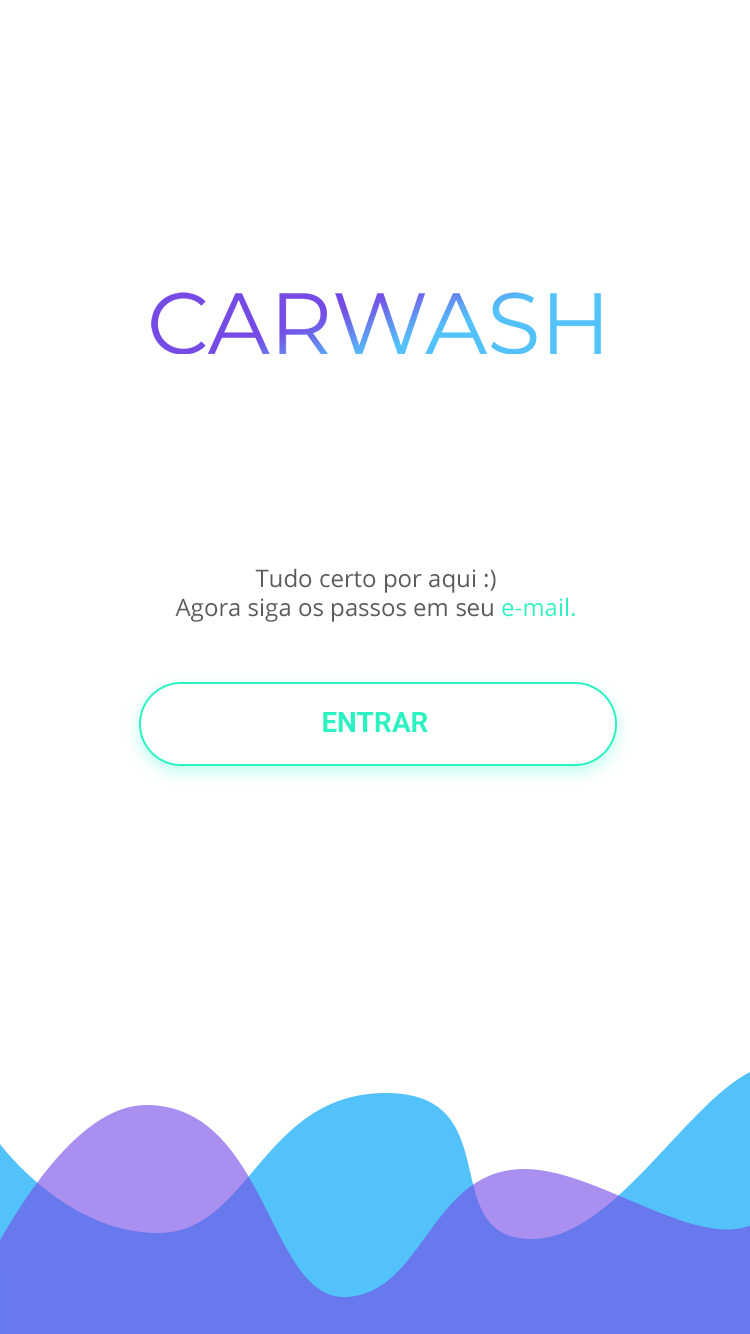
<style>
.page{position:relative;width:750px;height:1334px;background:#ffffff}
.page>*{position:absolute;margin:0}
.t1{font:24px "OpenSans";color:#5d5a58}
.t2{font:24px "OpenSans";color:#2cf2c3}
.t3{font:28px "Roboto-Bold";color:#2cf2c3;text-transform:uppercase}
</style>
<div class="page">
<p class="t1" style="left:175px;top:568px;width:400px;height:54px;text-align:center">Tudo certo por aqui :)<br>Agora siga os passos em seu <span class="t2">e-mail.</span></p>
<p class="t3" style="left:323px;top:712px;width:105px;height:20px">entrar</p>
</div>
